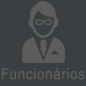
<style>
.page{position:relative;width:86px;height:86px;background:#3c3f41}
.page>*{position:absolute;margin:0}
.t1{font:14.6px "Helvetica-Normal";letter-spacing:0.06em;color:#5d5d5d;scale:0.9 1}
</style>
<div class="page">
<p class="t1" style="left:1px;top:67px;width:84px;height:13px">Funcionários</p>
</div>
